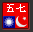
<style>
.page{position:relative;width:33px;height:32px;background:#f20000}
.page>*{position:absolute;margin:0}
.t1{font:10.4px "SimSun";color:#ffffff}
</style>
<div class="page">
<p class="t1" style="left:7px;top:4px;width:19px;height:8px">五七</p>
</div>
